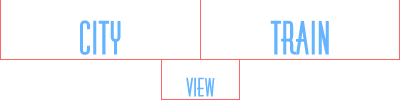
<style>
.page{position:relative;width:400px;height:100px;background:#ffffff}
.page>*{position:absolute;margin:0}
.t1{font:45px "HuxleyTitling";color:#64b4ff}
.t2{font:25px "HuxleyTitling";color:#64b4ff}
</style>
<div class="page">
<p class="t1" style="left:80px;top:20px;width:41px;height:35px">City</p>
<p class="t1" style="left:270px;top:20px;width:59px;height:35px">Train</p>
<p class="t2" style="left:186px;top:77px;width:29px;height:20px">View</p>
</div>
